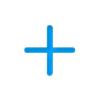
<style>
.page{position:relative;width:100px;height:100px;background:#ffffff}
.page>*{position:absolute;margin:0}
.t1{font:100px "Gulim";color:#0097e6}
</style>
<div class="page">
<p class="t1" style="left:24px;top:24px;width:52px;height:52px">+</p>
</div>
